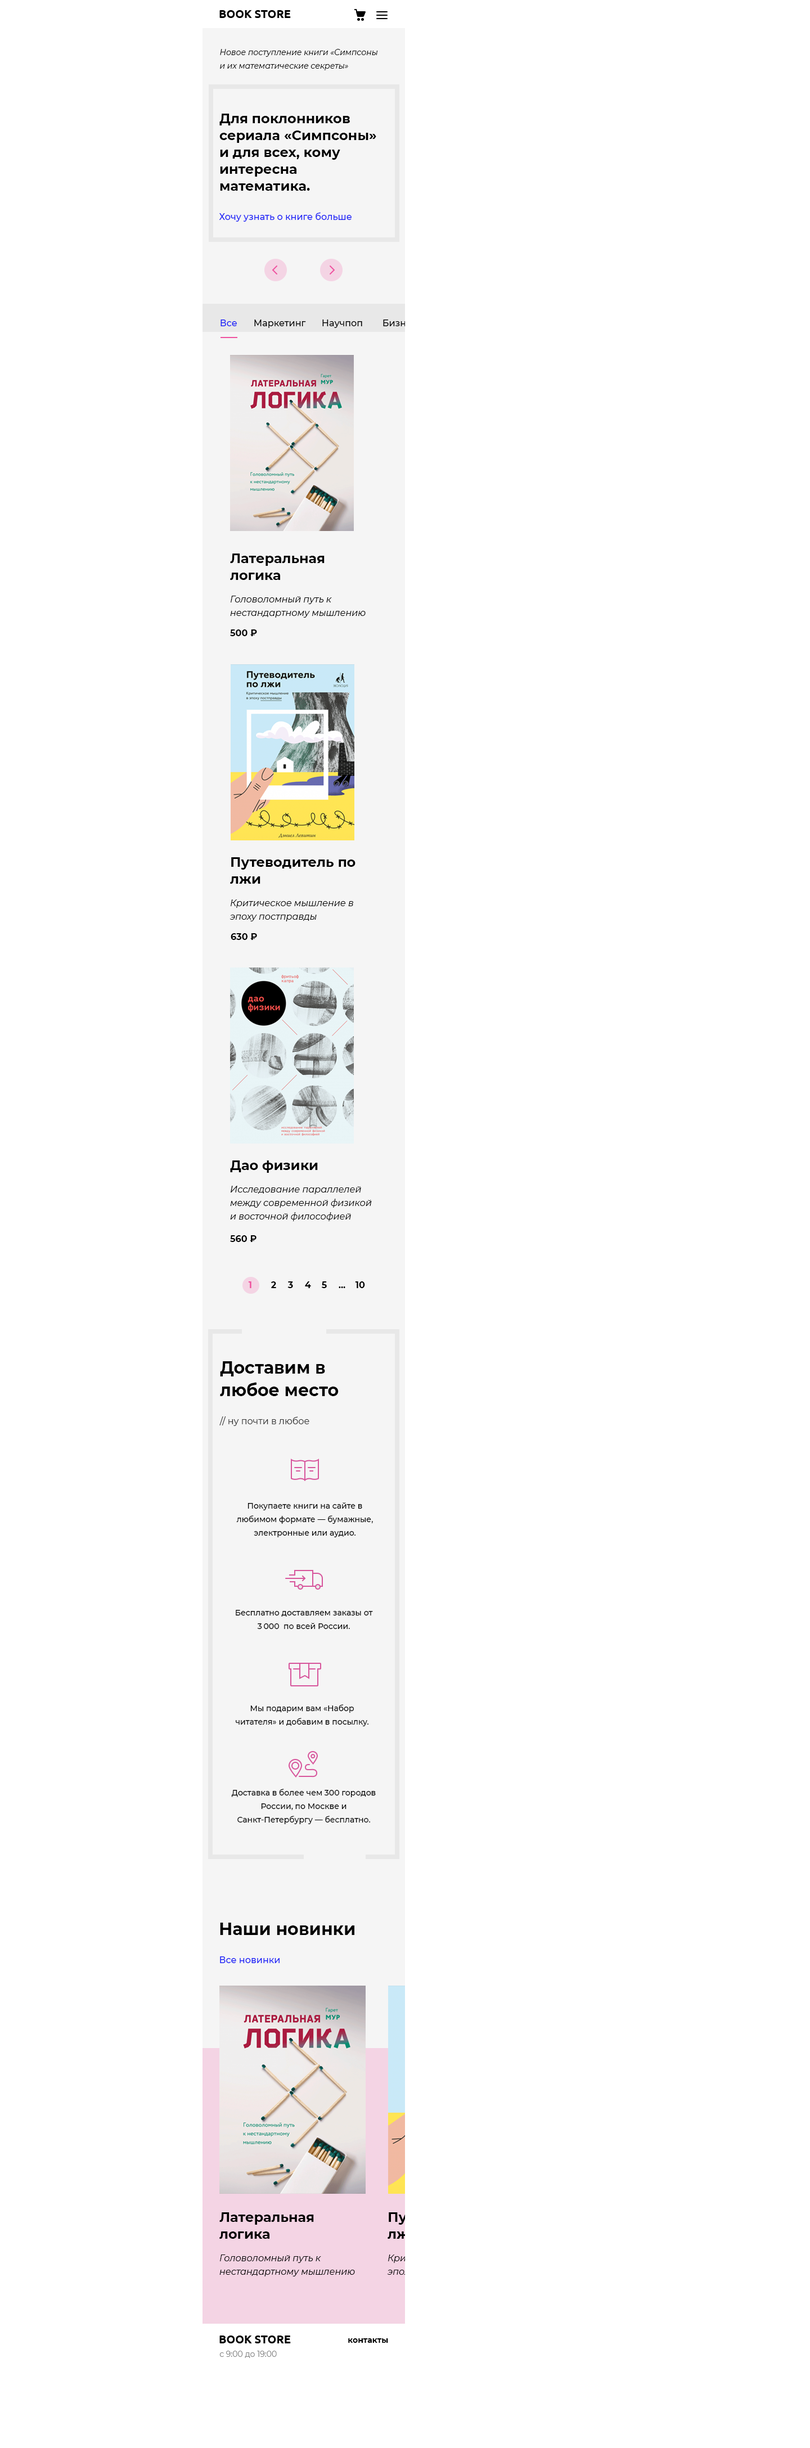
<style>
.page{position:relative;width:810px;height:2448px;background:#ffffff}
.page>*{position:absolute;margin:0}
.t1{font:7.9px/13.5px "Montserrat-Italic";color:#000000}
.t2{font:13.5px/16.9px "Montserrat-Bold";color:#000000}
.t3{font:9px "Montserrat-Medium";color:#1a1ff7}
.t4{font:9px "Montserrat-Medium";color:#000000}
.t5{font:9px/13.5px "Montserrat-Italic";color:#000000}
.t6{font:9px "Montserrat-Bold";color:#000000}
.t7{font:13.5px "Montserrat-Bold";color:#000000}
.t8{font:9px "Montserrat-Bold";color:#ef529f}
.t9{font:16.9px/22.5px "Montserrat-Bold";color:#000000}
.t10{font:9px "Montserrat-Regular";color:#333333}
.t11{font:7.9px/13.5px "Montserrat-Medium";color:#000000}
.t12{font:16.9px "Montserrat-Bold";color:#000000}
.t13{font:13.5px/16.9px "Montserrat-Bold";color:#ffffff}
.t14{font:9px/13.5px "Montserrat-Italic";color:#ffffff}
.t15{font:7.9px "Montserrat-Bold";color:#000000}
.t16{font:7.9px "Montserrat-Regular";color:#828282}
</style>
<div class="page">
<p class="t1" style="left:220px;top:49px;width:158px;height:21px">Новое поступление книги «Симпсоны <br>и их математические секреты»</p>
<p class="t2" style="left:219px;top:114px;width:157px;height:77px">Для поклонников сериала «Симпсоны» и для всех, кому интересна математика.</p>
<p class="t3" style="left:219px;top:212px;width:133px;height:10px">Хочу узнать о книге больше</p>
<p class="t3" style="left:220px;top:320px;width:17px;height:6px">Все</p>
<p class="t4" style="left:254px;top:320px;width:52px;height:8px">Маркетинг</p>
<p class="t4" style="left:322px;top:320px;width:40px;height:8px">Научпоп</p>
<p class="t4" style="left:383px;top:320px;width:34px;height:6px">Бизнес</p>
<p class="t2" style="left:230px;top:554px;width:95px;height:26px">Латеральная логика</p>
<p class="t5" style="left:230px;top:596px;width:136px;height:22px">Головоломный путь к нестандартному мышлению</p>
<p class="t6" style="left:230px;top:629px;width:27px;height:7px">500 ₽</p>
<p class="t2" style="left:230px;top:857px;width:126px;height:27px">Путеводитель по лжи</p>
<p class="t5" style="left:230px;top:899px;width:123px;height:22px">Критическое мышление в эпоху постправды</p>
<p class="t6" style="left:231px;top:933px;width:26px;height:7px">630 ₽</p>
<p class="t7" style="left:230px;top:1160px;width:88px;height:13px">Дао физики</p>
<p class="t5" style="left:230px;top:1186px;width:142px;height:35px">Исследование параллелей между современной физикой и восточной философией</p>
<p class="t6" style="left:230px;top:1235px;width:26px;height:7px">560 ₽</p>
<p class="t8" style="left:248px;top:1281px;width:3px;height:7px">1</p>
<p class="t6" style="left:271px;top:1281px;width:5px;height:7px">2</p>
<p class="t6" style="left:287px;top:1281px;width:6px;height:7px">3</p>
<p class="t6" style="left:305px;top:1281px;width:6px;height:7px">4</p>
<p class="t6" style="left:321px;top:1281px;width:6px;height:7px">5</p>
<p class="t6" style="left:339px;top:1286px;width:6px;height:2px">...</p>
<p class="t6" style="left:355px;top:1281px;width:10px;height:7px">10</p>
<p class="t9" style="left:220px;top:1361px;width:119px;height:35px">Доставим в любое место</p>
<p class="t10" style="left:219px;top:1416px;width:90px;height:10px">// ну почти в любое</p>
<p class="t11" style="left:236px;top:1502px;width:137px;height:35px;text-align:center">Покупаете книги на сайте в любимом формате — бумажные, электронные или аудио.</p>
<p class="t11" style="left:236px;top:1610px;width:137px;height:19px;text-align:center">Бесплатно доставляем заказы от <br>3 000  по всей России.</p>
<p class="t11" style="left:236px;top:1704px;width:132px;height:22px;text-align:center">Мы подарим вам «Набор читателя» и добавим в посылку.</p>
<p class="t11" style="left:231px;top:1789px;width:145px;height:35px;text-align:center">Доставка в более чем 300 городов России, по Москве и Санкт-Петербургу — бесплатно.</p>
<p class="t12" style="left:220px;top:1923px;width:134px;height:12px">Наши новинки</p>
<p class="t3" style="left:220px;top:1956px;width:60px;height:7px">Все новинки</p>
<p class="t2" style="left:219px;top:2212px;width:95px;height:27px">Латеральная логика</p>
<p class="t13" style="left:388px;top:2212px;width:125px;height:27px">Путеводитель по лжи</p>
<p class="t5" style="left:219px;top:2254px;width:136px;height:22px">Головоломный путь к нестандартному мышлению</p>
<p class="t14" style="left:387px;top:2254px;width:124px;height:22px">Критическое мышление в эпоху постправды</p>
<p class="t15" style="left:348px;top:2338px;width:40px;height:5px">контакты</p>
<p class="t16" style="left:219px;top:2351px;width:58px;height:7px">с 9:00 до 19:00</p>
</div>
